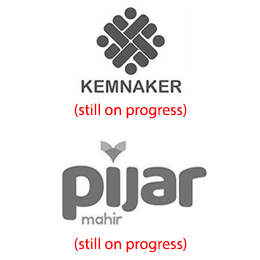
<style>
.page{position:relative;width:260px;height:260px;background:#ffffff}
.page>*{position:absolute;margin:0}
.t1{font:15.9px "MyriadPro-Regular";color:#ff0000}
</style>
<div class="page">
<p class="t1" style="left:74px;top:103px;width:113px;height:16px">(still on progress)</p>
<p class="t1" style="left:74px;top:237px;width:113px;height:16px">(still on progress)</p>
</div>
